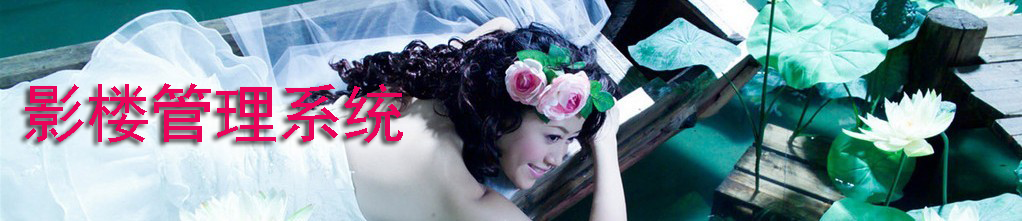
<style>
.page{position:relative;width:1022px;height:221px}
.page>*{position:absolute;margin:0}
.t1{font:64px "SimHei";color:#ea035a}
</style>
<div class="page">
<p class="t1" style="left:25px;top:83px;width:378px;height:60px">影楼管理系统</p>
</div>
